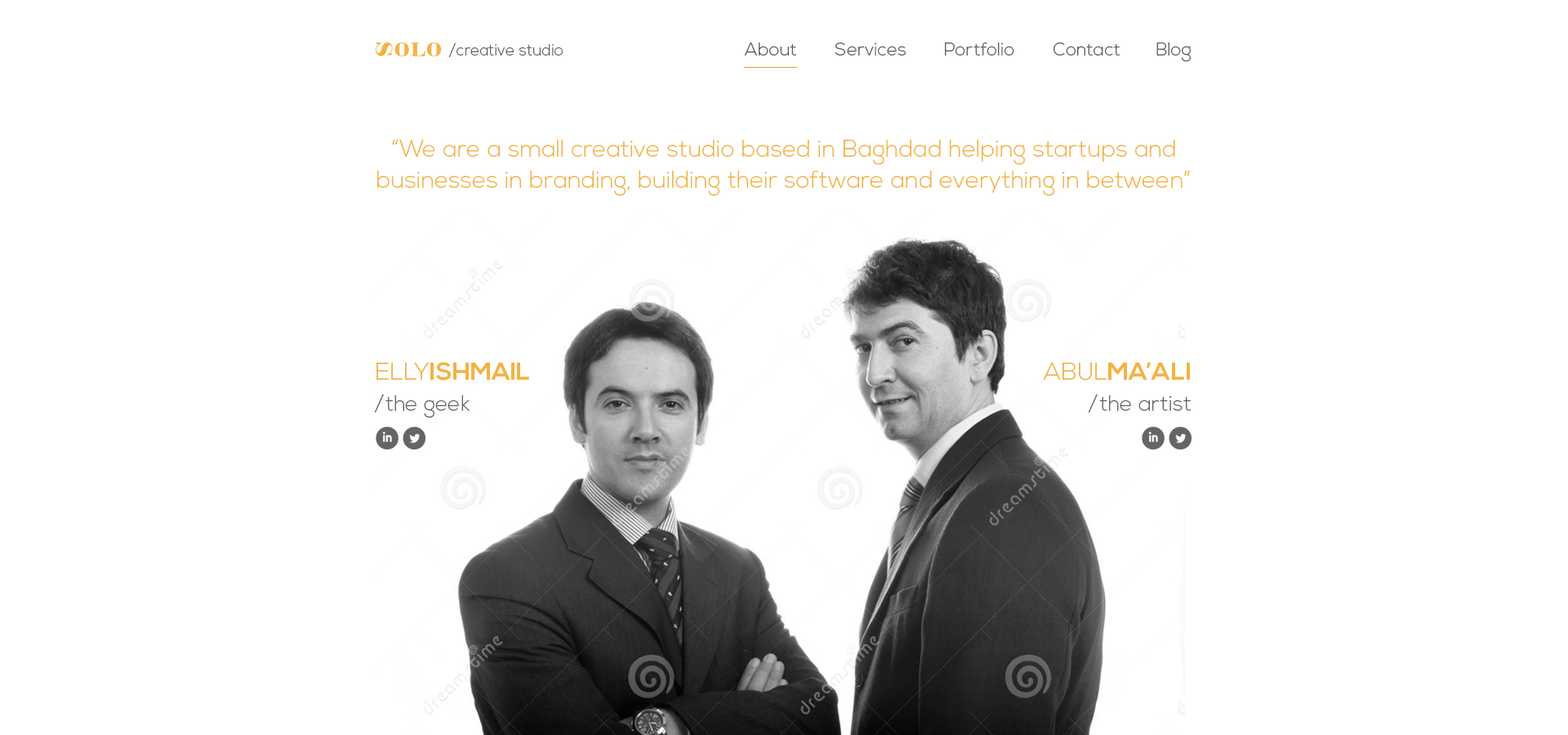
<style>
.page{position:relative;width:1568px;height:735px;background:#ffffff}
.page>*{position:absolute;margin:0}
.t1{font:15.7px "NexaLight";color:#616161}
.t2{font:18.2px "NexaLight";color:#616161}
.t3{font:23.7px/31px "NexaLight";color:#f3b344}
.t4{font:21.2px/31px "NexaLight";color:#666666}
.t5{font:24.5px/31px "NexaLight";color:#f3b344}
.t6{font:24.5px/31px "NexaBold";color:#f3b344}
</style>
<div class="page">
<p class="t1" style="left:448px;top:43px;width:115px;height:14px">/creative studio</p>
<p class="t2" style="left:744px;top:42px;width:52px;height:14px">About</p>
<p class="t2" style="left:835px;top:42px;width:71px;height:14px">Services</p>
<p class="t2" style="left:945px;top:42px;width:69px;height:14px">Portfolio</p>
<p class="t2" style="left:1054px;top:42px;width:66px;height:14px">Contact</p>
<p class="t2" style="left:1156px;top:42px;width:35px;height:20px">Blog</p>
<p class="t3" style="left:377px;top:140px;width:813px;height:56px;text-align:justify">“We are a small creative studio based in Baghdad helping startups and <br>businesses in branding, building their software and everything in between”</p>
<p class="t4" style="left:374px;top:362px;width:155px;height:56px"><span class="t5">ELLY</span><span class="t6">ISHMAIL<br></span>/the geek</p>
<p class="t4" style="left:1043px;top:363px;width:149px;height:49px;text-align:right"><span class="t5">ABUL</span><span class="t6">MA’ALI<br></span>/the artist</p>
</div>
